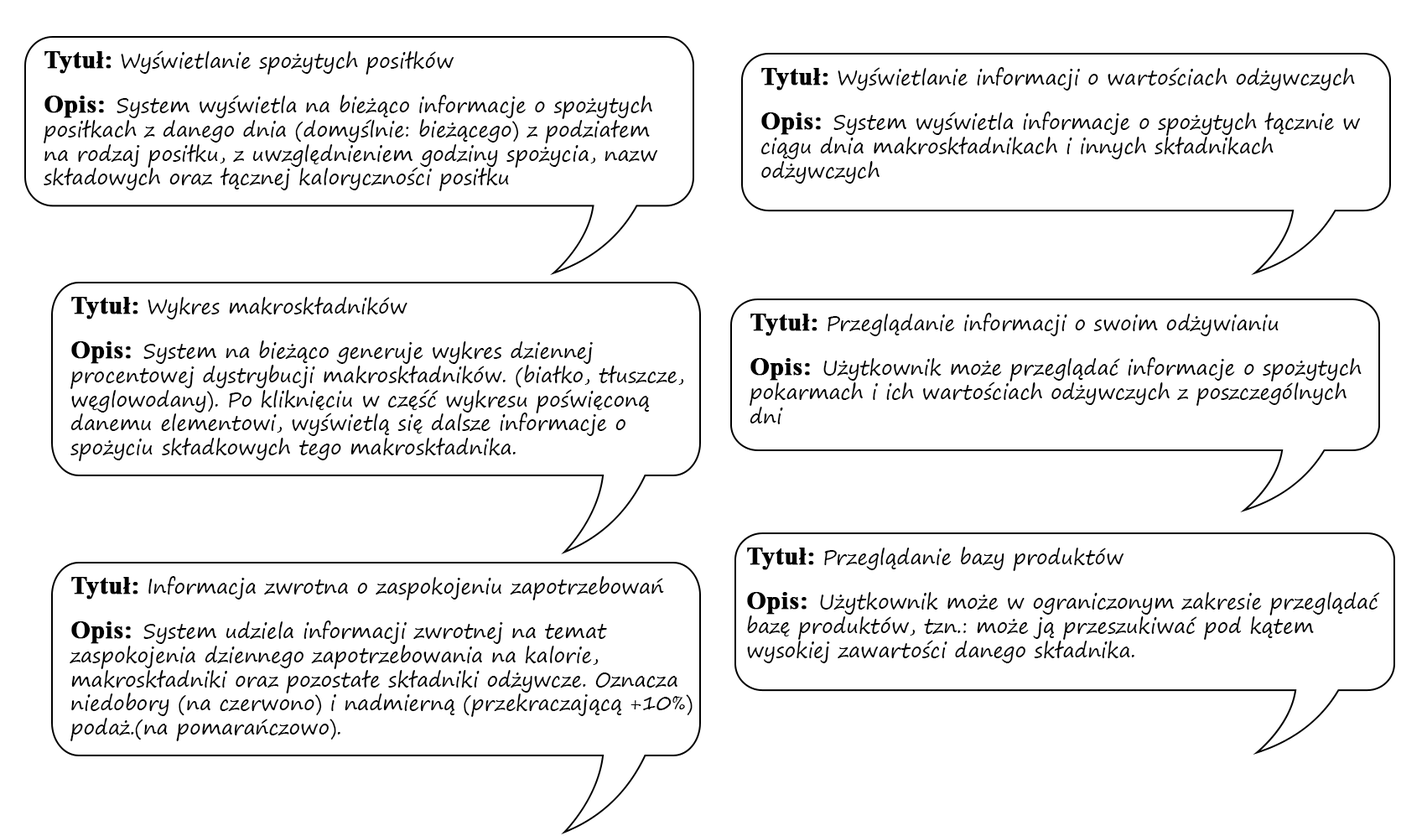
<style>
.page{position:relative;width:1427px;height:836px;background:#ffffff}
.page>*{position:absolute;margin:0}
.t1{font:20.1px "SegoePrint";color:#000000}
.t2{font:25.1px "TimesNewRomanPS-BoldMT";color:#000000;font-weight:bold}
</style>
<div class="page">
<p class="t1" style="left:44px;top:50px;width:613px;height:141px"><span class="t2">Tytuł: </span>Wyświetlanie spożytych posiłków<br><br><span class="t2">Opis:  </span>System wyświetla na bieżąco informacje o spożytych posiłkach z danego dnia (domyślnie: bieżącego) z podziałem na rodzaj posiłku, z uwzględnieniem godziny spożycia, nazw składowych oraz łącznej kaloryczności posiłku</p>
<p class="t1" style="left:761px;top:67px;width:599px;height:117px"><span class="t2">Tytuł: </span>Wyświetlanie informacji o wartościach odżywczych<br><br><span class="t2">Opis:  </span>System wyświetla informacje o spożytych łącznie w ciągu dnia makroskładnikach i innych składnikach odżywczych</p>
<p class="t1" style="left:70px;top:297px;width:614px;height:164px"><span class="t2">Tytuł: </span>Wykres makroskładników<br><br><span class="t2">Opis:  </span>System na bieżąco generuje wykres dziennej procentowej dystrybucji makroskładników. (białko, tłuszcze, węglowodany). Po kliknięciu w część wykresu poświęconą danemu elementowi, wyświetlą się dalsze informacje o spożyciu składkowych tego makroskładnika.</p>
<p class="t1" style="left:749px;top:313px;width:612px;height:111px"><span class="t2">Tytuł: </span>Przeglądanie informacji o swoim odżywianiu<br><br><span class="t2">Opis:  </span>Użytkownik może przeglądać informacje o spożytych pokarmach i ich wartościach odżywczych z poszczególnych dni</p>
<p class="t1" style="left:747px;top:547px;width:633px;height:116px"><span class="t2">Tytuł: </span>Przeglądanie bazy produktów<br><br><span class="t2">Opis:  </span>Użytkownik może w ograniczonym zakresie przeglądać bazę produktów, tzn.: może ją przeszukiwać pod kątem wysokiej zawartości danego składnika.</p>
<p class="t1" style="left:70px;top:576px;width:622px;height:165px"><span class="t2">Tytuł: </span>Informacja zwrotna o zaspokojeniu zapotrzebowań<br><br><span class="t2">Opis:  </span>System udziela informacji zwrotnej na temat zaspokojenia dziennego zapotrzebowania na kalorie, makroskładniki oraz pozostałe składniki odżywcze. Oznacza niedobory (na czerwono) i nadmierną (przekraczającą +10%) podaż.(na pomarańczowo).</p>
</div>
